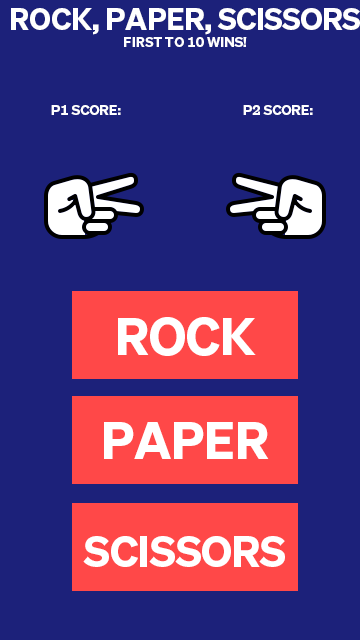
<style>
.page{position:relative;width:360px;height:640px;background:#1c217a}
.page>*{position:absolute;margin:0}
.t1{font:30px "Hakuna-Sans";color:#ffffff}
.t2{font:14px "Hakuna-Sans";color:#ffffff}
.t3{font:50.9px "Hakuna-Sans";color:#ffffff}
.t4{font:42.5px "Hakuna-Sans";color:#ffffff}
</style>
<div class="page">
<p class="t1" style="left:11px;top:8px;width:349px;height:39px;text-align:center">Rock, paper, scissors<br><span class="t2">first to 10 wins!</span></p>
<p class="t2" style="left:51px;top:105px;width:70px;height:10px">p1 ScorE:</p>
<p class="t2" style="left:243px;top:105px;width:70px;height:10px">p2 Score:</p>
<p class="t3" style="left:118px;top:317px;width:138px;height:39px">Rock</p>
<p class="t3" style="left:104px;top:422px;width:165px;height:37px">paper</p>
<p class="t4" style="left:83px;top:536px;width:202px;height:31px">scissors</p>
</div>
